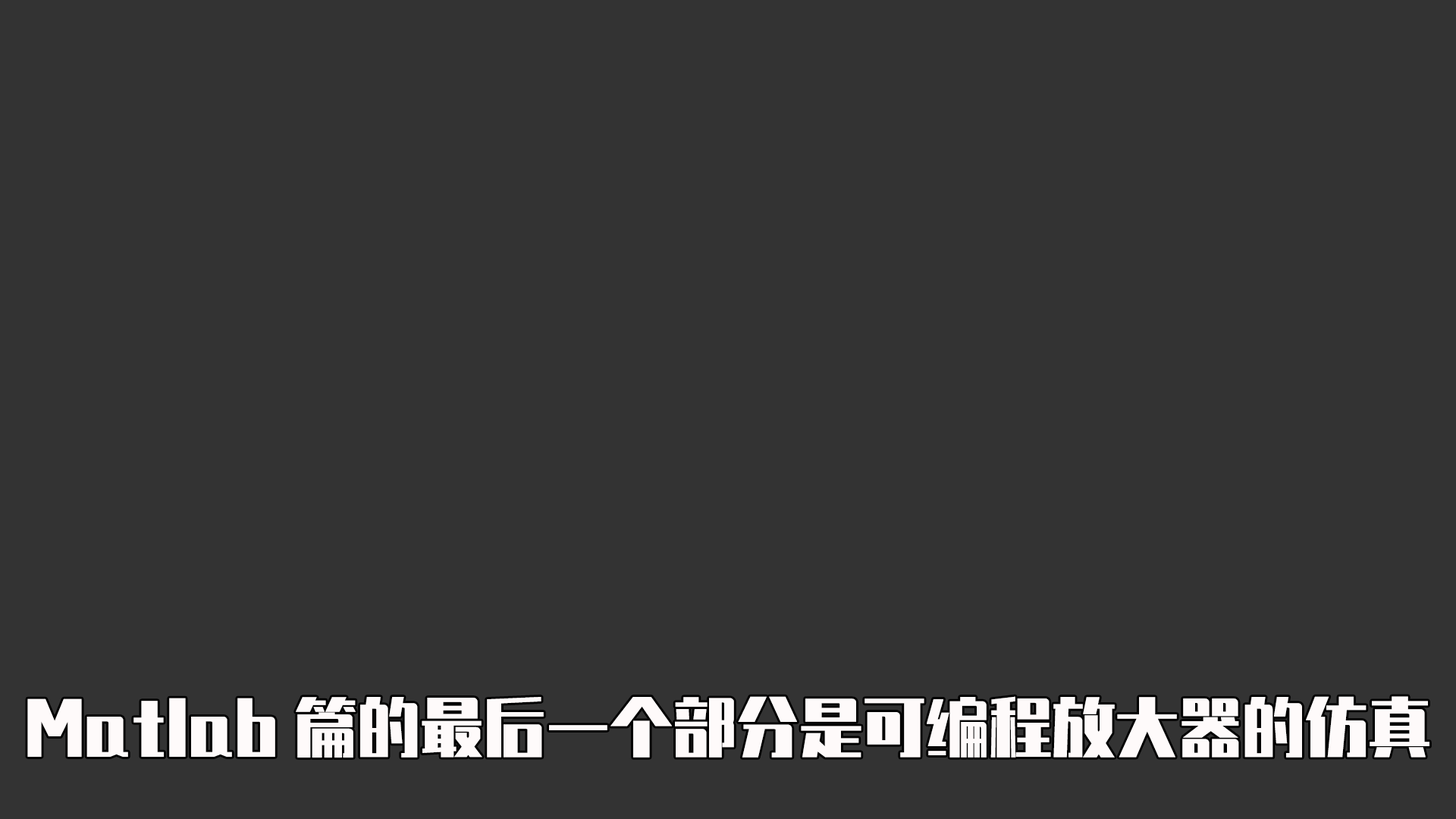
<style>
.page{position:relative;width:1456px;height:819px;background:#333333}
.page>*{position:absolute;margin:0}
.t1{font:63.2px "ZhenyanGB-Regular";color:#fefafa}
</style>
<div class="page">
<p class="t1" style="left:27px;top:696px;width:1402px;height:62px">Matlab篇的最后一个部分是可编程放大器的仿真</p>
</div>
